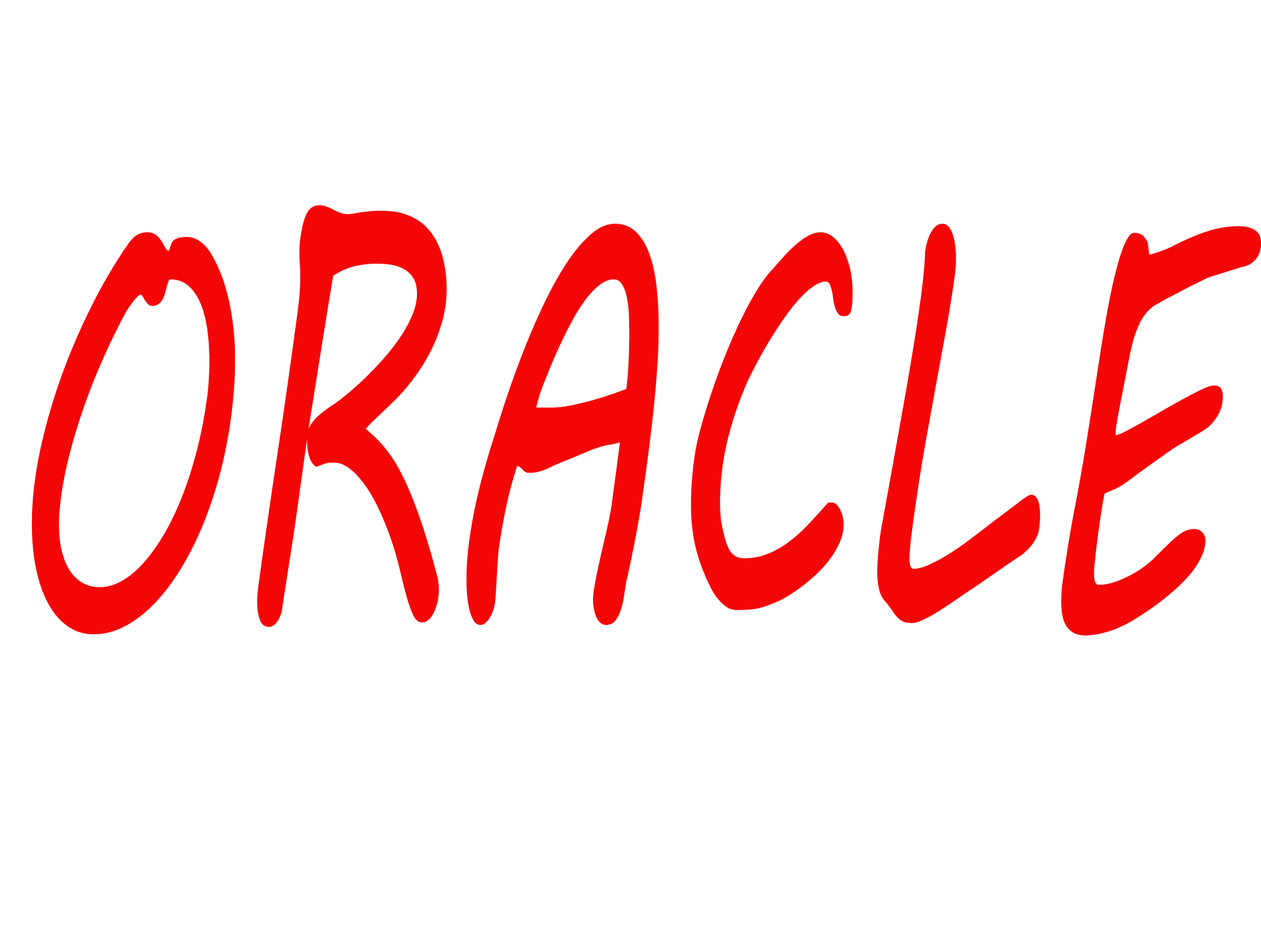
<style>
.page{position:relative;width:1261px;height:946px;background:#ffffff}
.page>*{position:absolute;margin:0}
.t1{font:565px "MVBoli";color:#f50606;scale:0.55 1}
</style>
<div class="page">
<p class="t1" style="left:31px;top:205px;width:1231px;height:430px">ORACLE</p>
</div>
